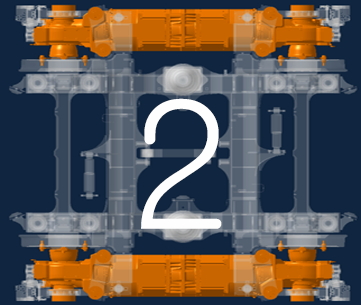
<style>
.page{position:relative;width:361px;height:305px;background:#10253f}
.page>*{position:absolute;margin:0}
.t1{font:176.4px "Gulim";color:#fefefe}
</style>
<div class="page">
<p class="t1" style="left:141px;top:98px;width:81px;height:131px">2</p>
</div>
